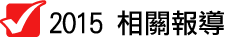
<style>
.page{position:relative;width:225px;height:38px;background:#ffffff}
.page>*{position:absolute;margin:0}
.t1{font:27px "DFLiHei-Md-WIN-BF";color:#000000}
</style>
<div class="page">
<p class="t1" style="left:50px;top:10px;width:174px;height:26px">2015 相關報導</p>
</div>
